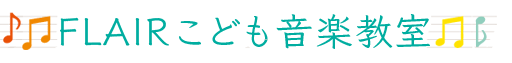
<style>
.page{position:relative;width:512px;height:63px;background:#ffffff}
.page>*{position:absolute;margin:0}
.t1{font:38px "Klee-Demibold";letter-spacing:0.05em;color:#00ada0}
</style>
<div class="page">
<p class="t1" style="left:60px;top:14px;width:370px;height:35px">FLAIRこども音楽教室</p>
</div>
